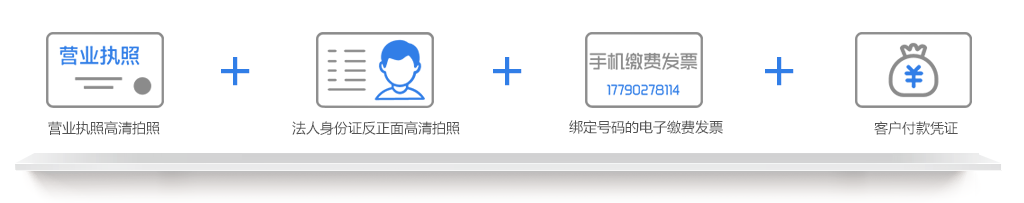
<style>
.page{position:relative;width:1024px;height:203px;background:#ffffff}
.page>*{position:absolute;margin:0}
.t1{font:57px "MicrosoftYaHei";color:#317ee7;text-transform:uppercase}
.t2{font:14px "MicrosoftYaHei";color:#535353;text-transform:uppercase}
</style>
<div class="page">
<p class="t1" style="left:221px;top:57px;width:29px;height:29px">+</p>
<p class="t1" style="left:493px;top:57px;width:29px;height:29px">+</p>
<p class="t1" style="left:765px;top:57px;width:29px;height:29px">+</p>
<p class="t2" style="left:48px;top:121px;width:112px;height:14px">营业执照高清拍照</p>
<p class="t2" style="left:292px;top:121px;width:168px;height:14px">法人身份证反正面高清拍照</p>
<p class="t2" style="left:569px;top:120px;width:154px;height:14px">绑定号码的电子缴费发票</p>
<p class="t2" style="left:874px;top:121px;width:84px;height:14px">客户付款凭证</p>
</div>
